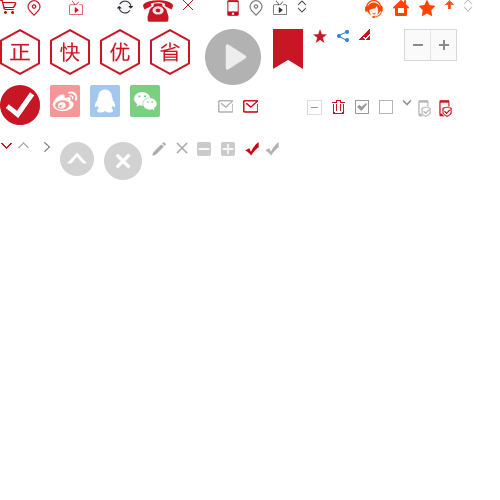
<style>
.page{position:relative;width:500px;height:500px;background:#ffffff}
.page>*{position:absolute;margin:0}
.t1{font:20px "MicrosoftYaHei";color:#c81624}
</style>
<div class="page">
<p class="t1" style="left:10px;top:43px;width:20px;height:18px">正</p>
<p class="t1" style="left:60px;top:42px;width:20px;height:20px">快</p>
<p class="t1" style="left:110px;top:42px;width:20px;height:20px">优</p>
<p class="t1" style="left:160px;top:42px;width:20px;height:20px">省</p>
</div>
